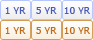
<style>
.page{position:relative;width:93px;height:40px}
.page>*{position:absolute;margin:0}
.t1{font:9px "Verdana";color:#4959b8}
.t2{font:9px "Verdana";color:#c06a15}
.t3{font:9px "Verdana";color:#bf6a16}
</style>
<div class="page">
<p class="t1" style="left:5px;top:7px;width:21px;height:7px">1 YR</p>
<p class="t1" style="left:36px;top:7px;width:21px;height:7px">5 YR</p>
<p class="t1" style="left:64px;top:7px;width:26px;height:7px">10 YR</p>
<p class="t2" style="left:5px;top:27px;width:21px;height:7px">1 YR</p>
<p class="t2" style="left:36px;top:27px;width:21px;height:7px">5 YR</p>
<p class="t3" style="left:64px;top:27px;width:26px;height:7px">10 YR</p>
</div>
